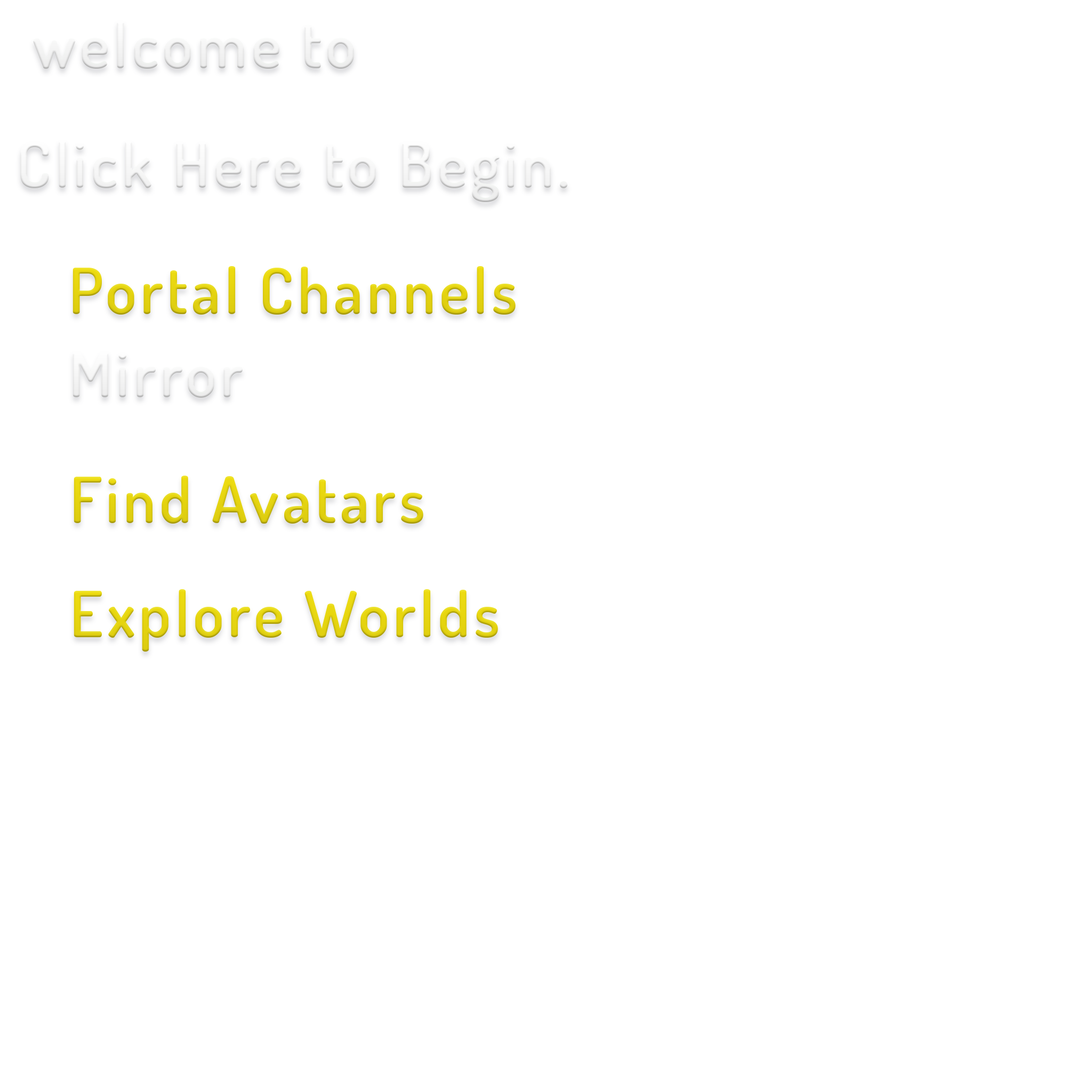
<style>
.page{position:relative;width:1092px;height:1092px;background:#ffffff}
.page>*{position:absolute;margin:0}
.t1{font:63.3px "Dosis-SemiBold";letter-spacing:0.06em;color:#ffffff}
.t2{font:63.3px "Dosis-SemiBold";letter-spacing:0.06em;color:#eedc10}
</style>
<div class="page">
<p class="t1" style="left:33px;top:20px;width:321px;height:49px">welcome to</p>
<p class="t1" style="left:20px;top:140px;width:548px;height:62px">Click Here to Begin.</p>
<p class="t2" style="left:73px;top:266px;width:443px;height:49px">Portal Channels</p>
<p class="t1" style="left:73px;top:351px;width:170px;height:47px">Mirror</p>
<p class="t2" style="left:74px;top:476px;width:349px;height:48px">Find Avatars</p>
<p class="t2" style="left:74px;top:589px;width:424px;height:63px">Explore Worlds</p>
</div>
